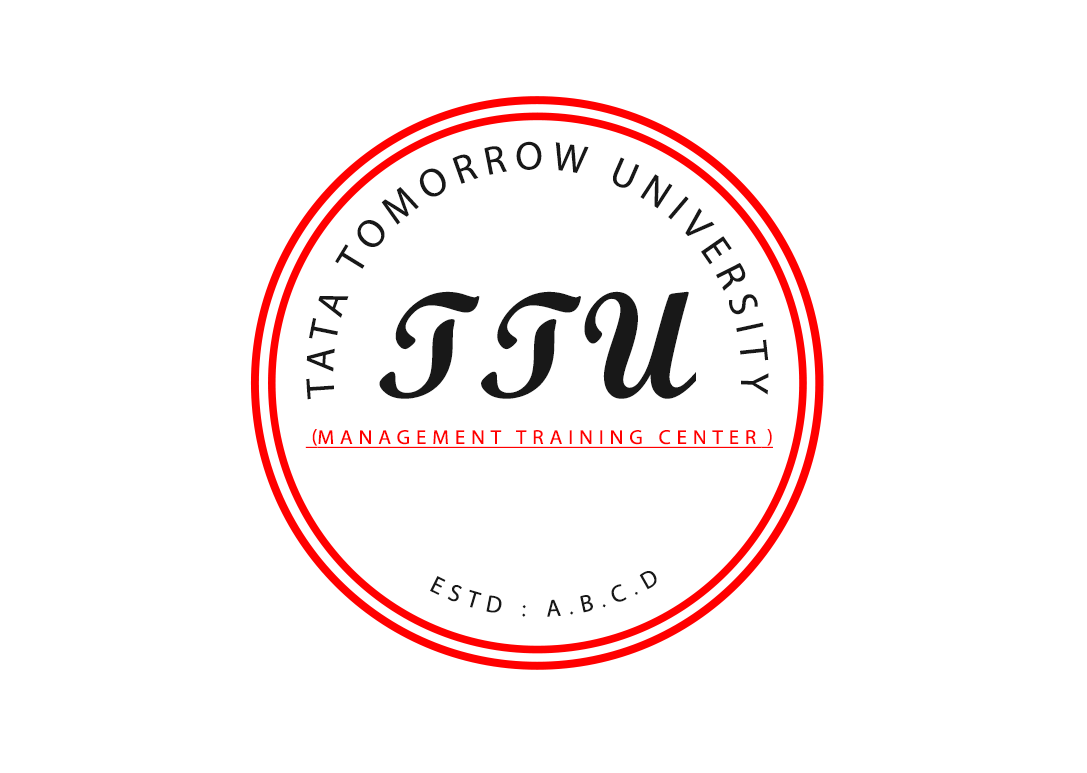
<style>
.page{position:relative;width:1087px;height:773px;background:#ffffff}
.page>*{position:absolute;margin:0}
.t1{font:40.1px "MyriadPro-Regular";letter-spacing:0.18em;color:#181818;text-transform:uppercase}
.t2{font:150.9px "ScriptMTBold";color:#181818;text-transform:uppercase}
.t3{font:20.2px "MyriadPro-Regular";letter-spacing:0.26em;color:#ff0000;text-transform:uppercase;text-decoration:underline;scale:1.04 1}
.t4{font:24.1px "MyriadPro-Regular";letter-spacing:0.32em;color:#181818;text-transform:uppercase}
</style>
<div class="page">
<p class="t1" style="left:306px;top:141px;width:463px;height:259px;text-align:center">TATA TOMORROW UNIVERSITY</p>
<p class="t2" style="left:379px;top:291px;width:317px;height:108px">TTU</p>
<p class="t3" style="left:305px;top:429px;width:468px;height:19px">(Management training center)</p>
<p class="t4" style="left:430px;top:571px;width:227px;height:46px;text-align:center">estd : A.b.c.d</p>
</div>
